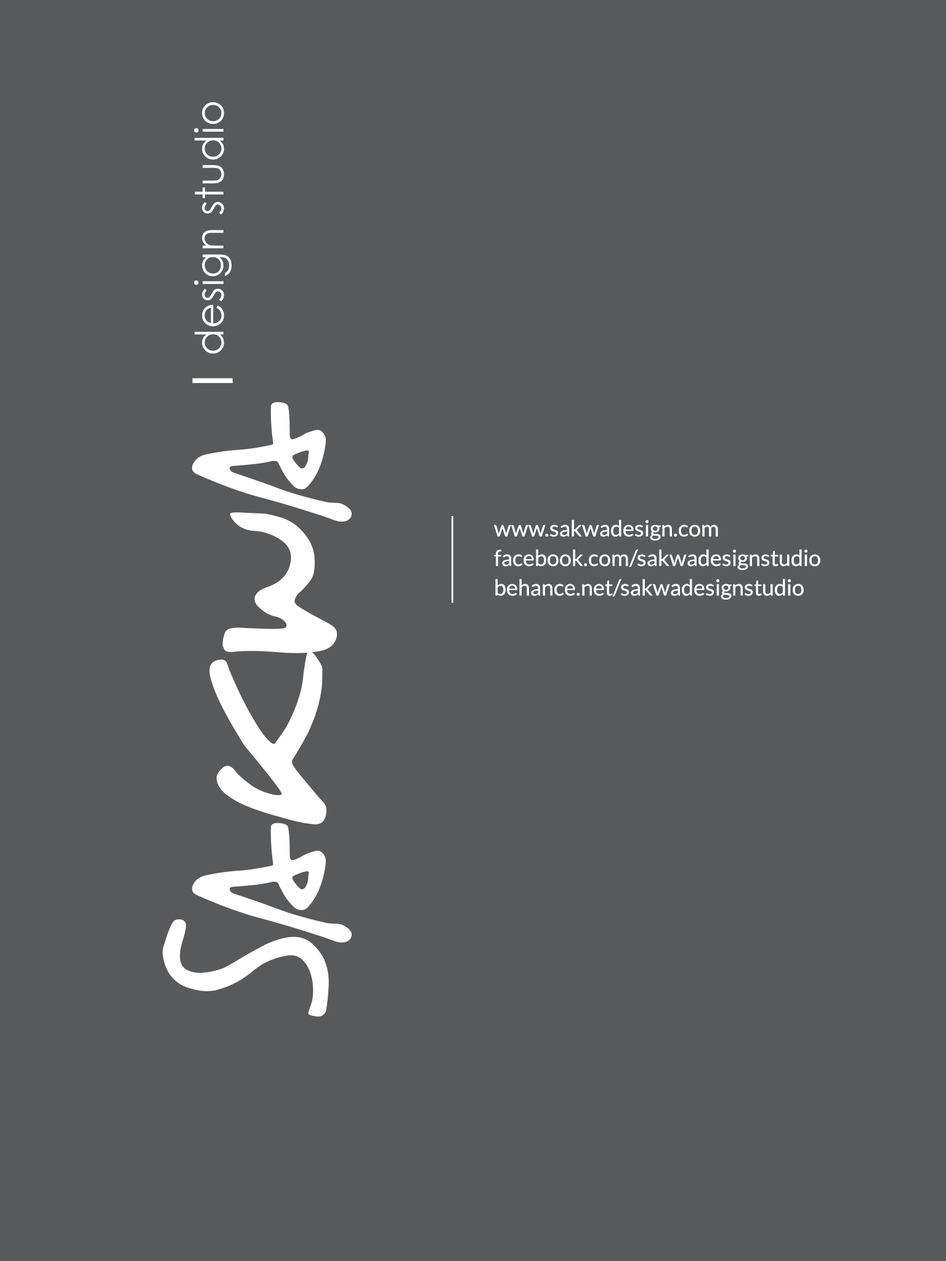
<style>
.page{position:relative;width:946px;height:1261px;background:#57595b}
.page>*{position:absolute;margin:0}
.t1{font:22.2px/29.6px "Lato-Regular";color:#ffffff}
</style>
<div class="page">
<p class="t1" style="left:494px;top:520px;width:326px;height:80px">www.sakwadesign.com<br>facebook.com/sakwadesignstudio<br>behance.net/sakwadesignstudio</p>
</div>
